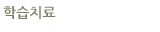
<style>
.page{position:relative;width:160px;height:32px;background:#ffffff}
.page>*{position:absolute;margin:0}
.t1{font:14px "NanumGothicBold";color:#79805f}
</style>
<div class="page">
<p class="t1" style="left:3px;top:6px;width:53px;height:13px">학습치료</p>
</div>
